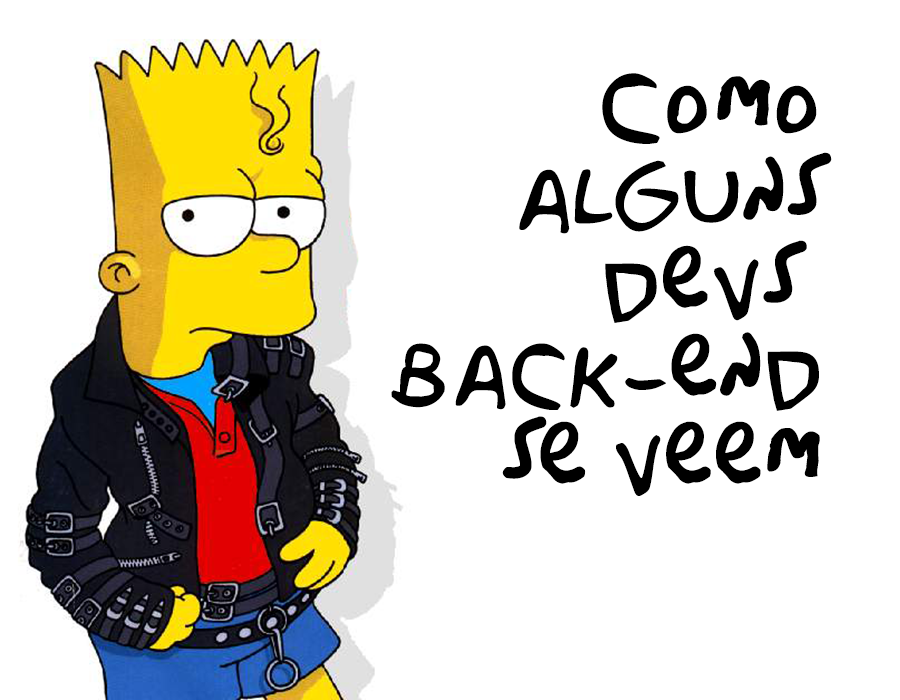
<style>
.page{position:relative;width:900px;height:700px;background:#ffffff}
.page>*{position:absolute;margin:0}
.t1{font:87.9px/87.9px "Originally-compiled-by-Jon-Bernhardt.";color:#000000;font-weight:bold}
</style>
<div class="page">
<p class="t1" style="left:391px;top:73px;width:441px;height:423px;text-align:right">Como<br>alguns<br>devs <br>back-end<br>se veem</p>
</div>
